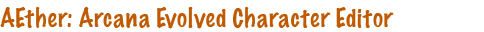
<style>
.page{position:relative;width:484px;height:32px;background:#ffffff}
.page>*{position:absolute;margin:0}
.t1{font:24px "MarkerFelt-Thin";color:#c05a00}
</style>
<div class="page">
<p class="t1" style="left:0px;top:7px;width:394px;height:22px">AEther: Arcana Evolved Character Editor</p>
</div>
